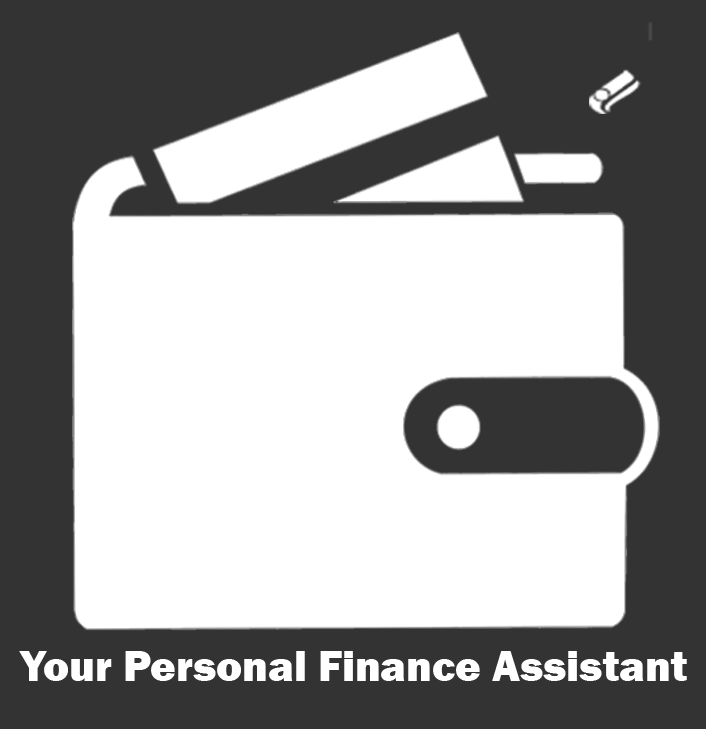
<style>
.page{position:relative;width:706px;height:729px;background:#333333}
.page>*{position:absolute;margin:0}
.t1{font:43.9px "FranklinGothic-Heavy";color:#ffffff}
</style>
<div class="page">
<p class="t1" style="left:19px;top:651px;width:668px;height:30px">Your Personal Finance Assistant</p>
</div>
